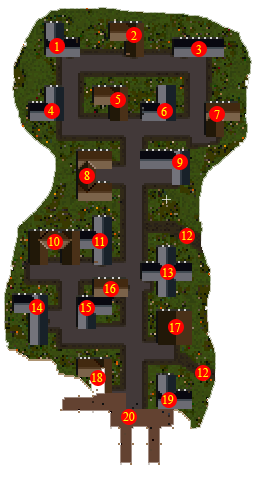
<style>
.page{position:relative;width:257px;height:479px;background:#ffffff}
.page>*{position:absolute;margin:0}
.t1{font:20px "TimesNewRomanPSMT";color:#fef502}
</style>
<div class="page">
<p class="t1" style="left:131px;top:31px;width:6px;height:9px">2</p>
<p class="t1" style="left:55px;top:42px;width:4px;height:9px">1</p>
<p class="t1" style="left:196px;top:45px;width:6px;height:9px">3</p>
<p class="t1" style="left:115px;top:95px;width:6px;height:9px">5</p>
<p class="t1" style="left:48px;top:106px;width:6px;height:9px">4</p>
<p class="t1" style="left:161px;top:107px;width:6px;height:9px">6</p>
<p class="t1" style="left:214px;top:110px;width:6px;height:9px">7</p>
<p class="t1" style="left:177px;top:158px;width:6px;height:9px">9</p>
<p class="t1" style="left:84px;top:171px;width:6px;height:9px">8</p>
<p class="t1" style="left:182px;top:231px;width:11px;height:9px">12</p>
<p class="t1" style="left:49px;top:237px;width:11px;height:9px">10</p>
<p class="t1" style="left:95px;top:237px;width:10px;height:9px">11</p>
<p class="t1" style="left:163px;top:268px;width:10px;height:9px">13</p>
<p class="t1" style="left:105px;top:284px;width:11px;height:9px">16</p>
<p class="t1" style="left:32px;top:303px;width:11px;height:9px">14</p>
<p class="t1" style="left:81px;top:303px;width:10px;height:9px">15</p>
<p class="t1" style="left:170px;top:323px;width:11px;height:9px">17</p>
<p class="t1" style="left:92px;top:373px;width:11px;height:9px">18</p>
<p class="t1" style="left:198px;top:368px;width:11px;height:9px">12</p>
<p class="t1" style="left:163px;top:395px;width:11px;height:9px">19</p>
<p class="t1" style="left:123px;top:412px;width:12px;height:9px">20</p>
</div>
